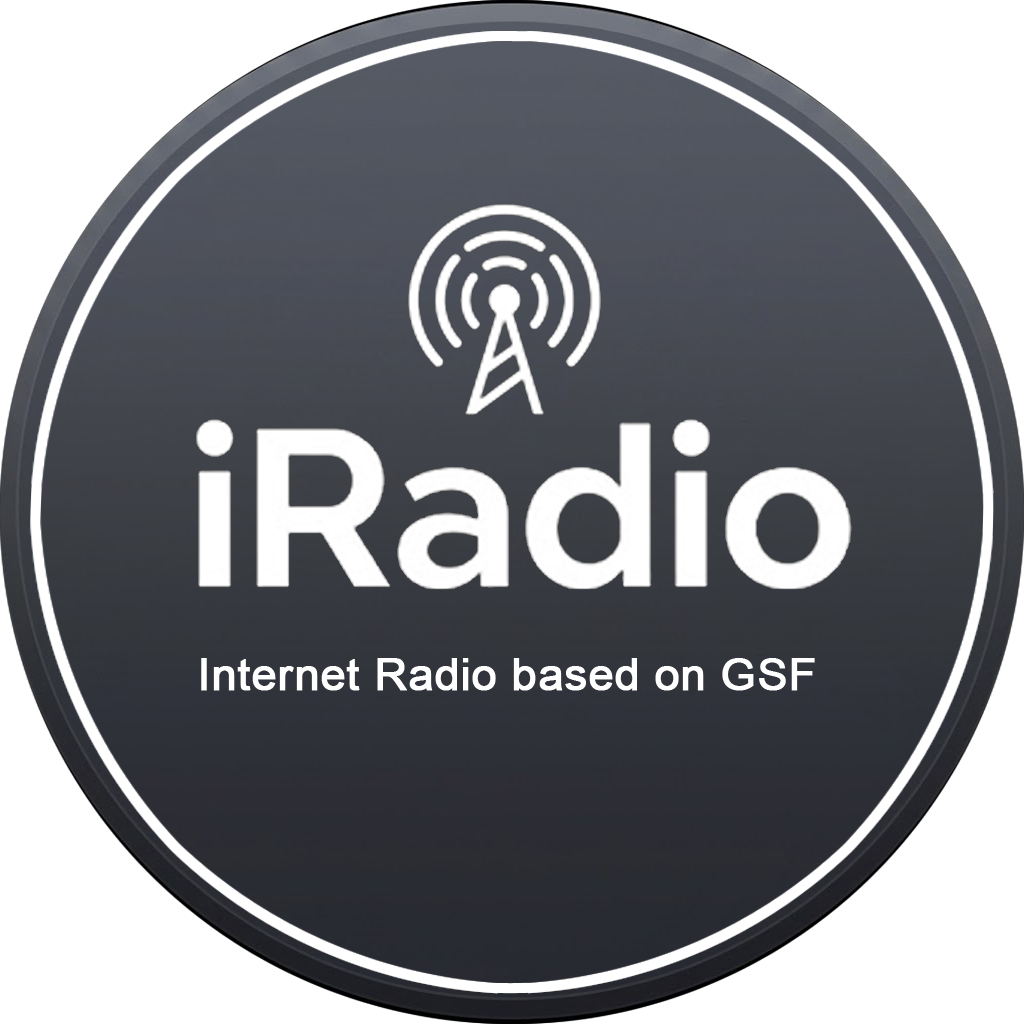
<style>
.page{position:relative;width:1024px;height:1024px;background:#ffffff}
.page>*{position:absolute;margin:0}
.t1{font:45.1px "ArialMT";color:#ffffff;font-weight:bold}
</style>
<div class="page">
<p class="t1" style="left:201px;top:658px;width:614px;height:33px">Internet Radio based on GSF</p>
</div>
